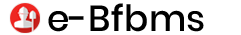
<style>
.page{position:relative;width:241px;height:35px;background:#ffffff}
.page>*{position:absolute;margin:0}
.t1{font:36px "Poppins-Medium";letter-spacing:0.012em;color:#000000}
</style>
<div class="page">
<p class="t1" style="left:48px;top:3px;width:156px;height:29px">e-Bfbms</p>
</div>
